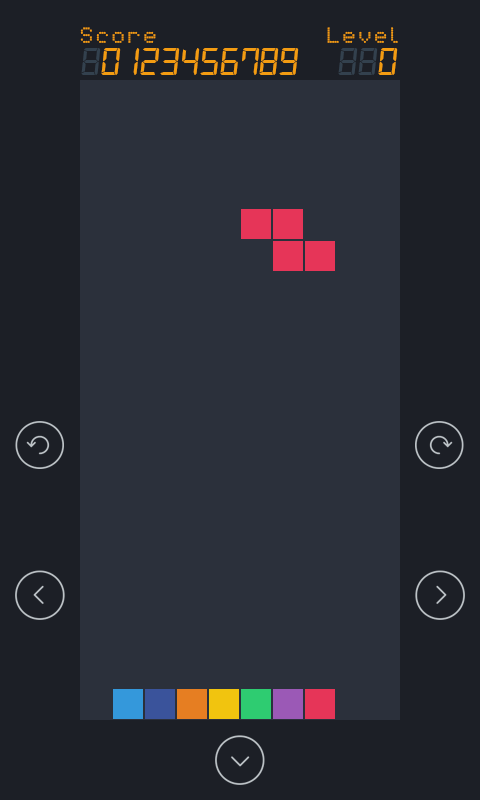
<style>
.page{position:relative;width:480px;height:800px;background:#2b303b}
.page>*{position:absolute;margin:0}
.t1{font:18px "Erbos-Draco-1st-Open-NBP";color:#f39c12}
.t2{font:42px "Digital-7MonoItalic";color:#f39c12}
.t3{font:42px "Digital-7MonoItalic";color:#33414e}
</style>
<div class="page">
<p class="t1" style="left:80px;top:27px;width:76px;height:16px">Score</p>
<p class="t1" style="left:327px;top:27px;width:71px;height:16px">Level</p>
<p class="t2" style="left:81px;top:48px;width:218px;height:27px"><span class="t3">8</span>0123456789</p>
<p class="t3" style="left:338px;top:48px;width:60px;height:27px">88<span class="t2">0</span></p>
</div>
